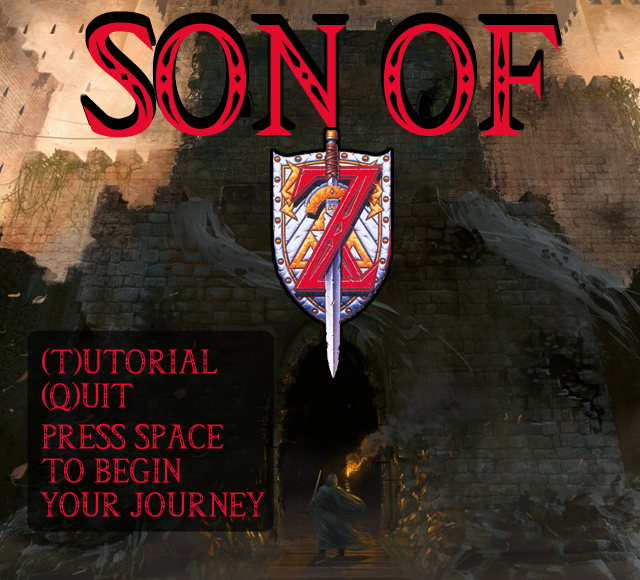
<style>
.page{position:relative;width:640px;height:580px}
.page>*{position:absolute;margin:0}
.t1{font:127px "Triforce";color:#e50b2d}
.t2{font:28px "Triforce";color:#e50b2d}
</style>
<div class="page">
<p class="t1" style="left:83px;top:22px;width:476px;height:117px">SON OF</p>
<p class="t2" style="left:42px;top:347px;width:176px;height:65px">(T)UTORIAL<br>(Q)UIT</p>
<p class="t2" style="left:40px;top:423px;width:226px;height:95px">PRESS SPACE<br>TO BEGIN YOUR JOURNEY</p>
</div>
